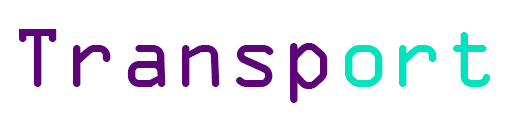
<style>
.page{position:relative;width:516px;height:118px;background:#ffffff}
.page>*{position:absolute;margin:0}
.t1{font:89.9px "OCRAExtended";color:#5d0479}
.t2{font:89.9px "OCRAExtended";color:#00e3be}
</style>
<div class="page">
<p class="t1" style="left:19px;top:29px;width:472px;height:74px">Transp<span class="t2">ort</span></p>
</div>
